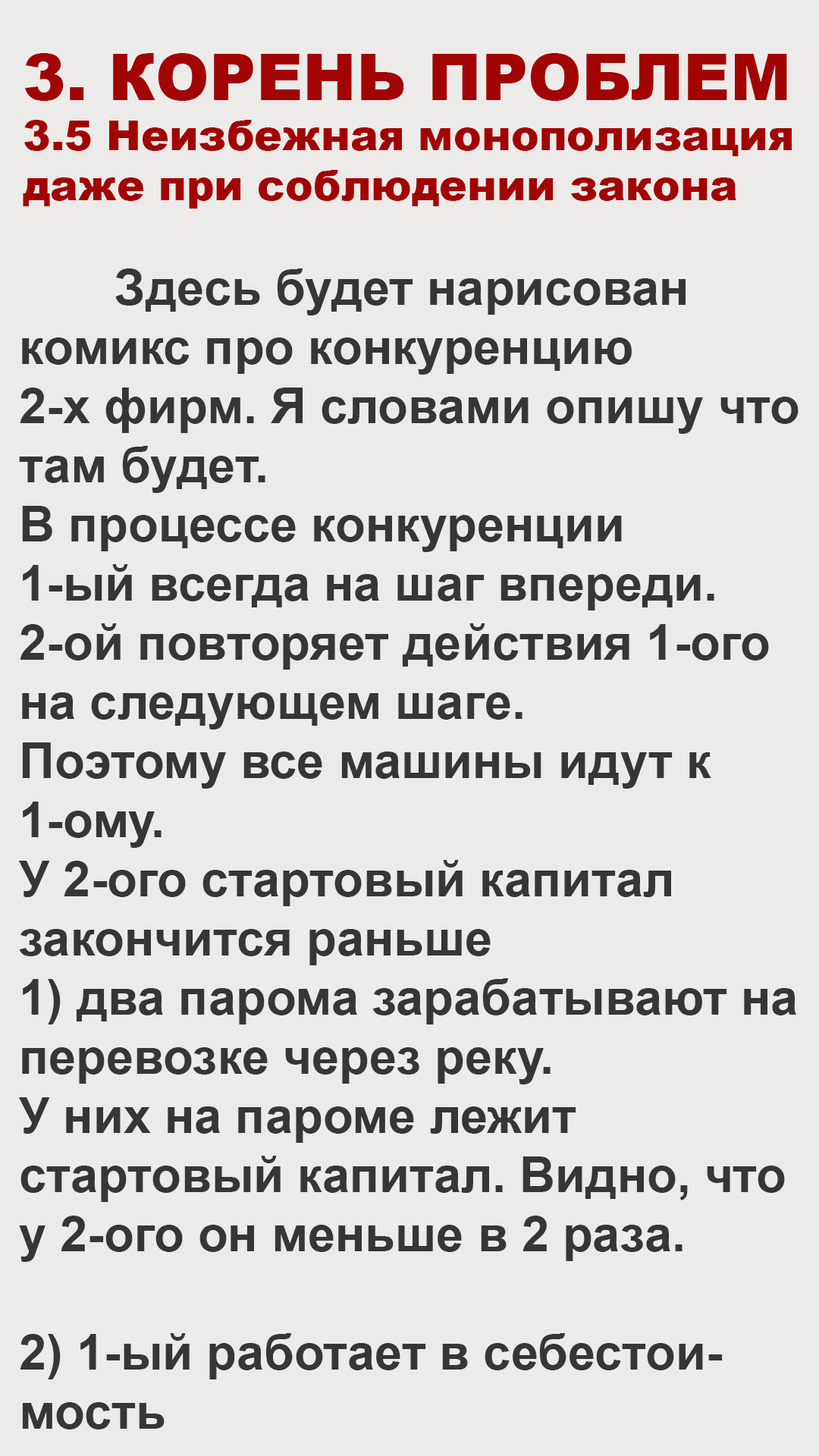
<style>
.page{position:relative;width:819px;height:1456px;background:#ecebe9}
.page>*{position:absolute;margin:0}
.t1{font:41.7px "Arial-Black";color:#a20403}
.t2{font:64.5px "Arial-Black";color:#a20403}
.t3{font:49.3px "Arial-BoldMT";color:#373634}
</style>
<div class="page">
<p class="t1" style="left:23px;top:53px;width:769px;height:156px"><span class="t2">3. КОРЕНЬ ПРОБЛЕМ<br></span>3.5 Неизбежная монополизация<br>даже при соблюдении закона</p>
<p class="t3" style="left:18px;top:268px;width:781px;height:1161px">Здесь будет нарисован<br>комикс про конкуренцию <br>2-х фирм. Я словами опишу что<br>там будет.<br>В процессе конкуренции<br>1-ый всегда на шаг впереди.<br>2-ой повторяет действия 1-ого <br>на следующем шаге.<br>Поэтому все машины идут к <br>1-ому.<br>У 2-ого стартовый капитал<br>закончится раньше<br>1) два парома зарабатывают на <br>перевозке через реку.<br>У них на пароме лежит<br>стартовый капитал. Видно, что<br>у 2-ого он меньше в 2 раза.<br><br>2) 1-ый работает в себестои-<br>мость</p>
</div>
